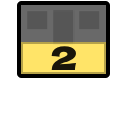
<style>
.page{position:relative;width:128px;height:128px;background:#ffffff}
.page>*{position:absolute;margin:0}
.t1{font:32.4px "DelaGothicOne-Regular";color:#19160a}
</style>
<div class="page">
<p class="t1" style="left:51px;top:46px;width:26px;height:25px">2</p>
</div>
